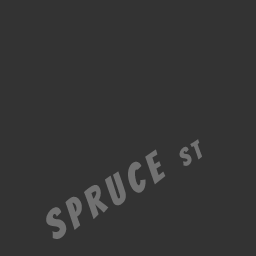
<style>
.page{position:relative;width:256px;height:256px;background:#333333}
.page>*{position:absolute;margin:0}
.t1{font:40px "Bangers-Regular";letter-spacing:0.16em;color:#717171}
.t2{font:24px "Bangers-Regular";letter-spacing:0.16em;color:#717171}
</style>
<div class="page">
<p class="t1" style="left:46px;top:139px;width:156px;height:100px;rotate:-30deg">Spruce <span class="t2">ST</span></p>
</div>
